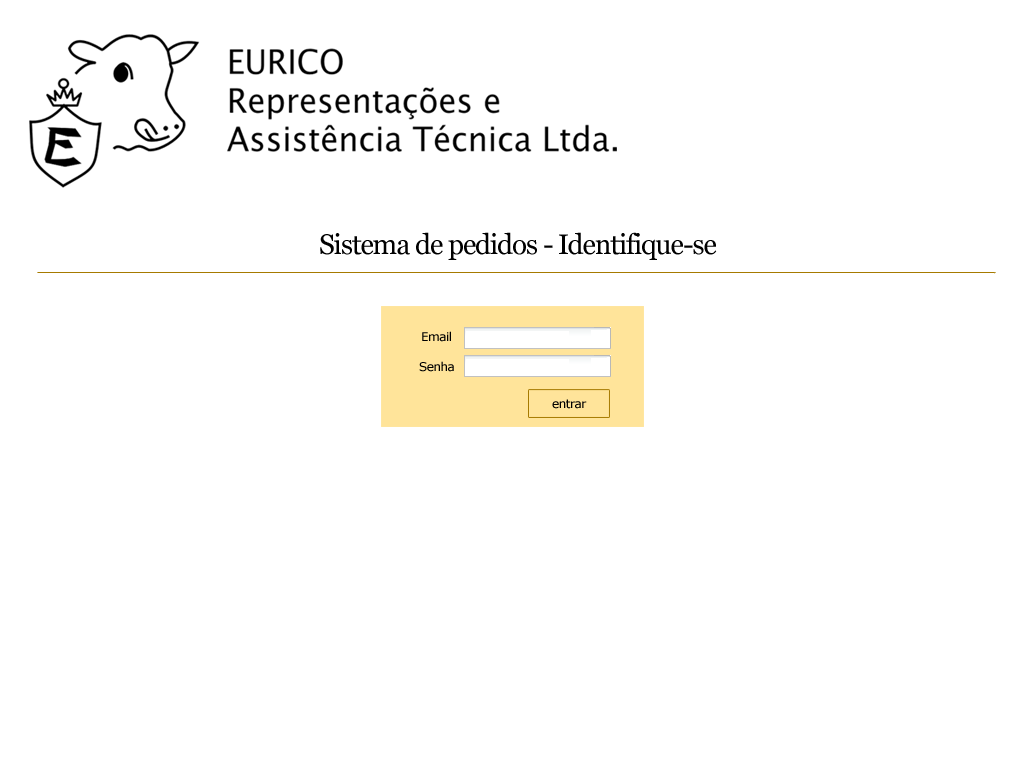
<style>
.page{position:relative;width:1024px;height:768px;background:#ffffff}
.page>*{position:absolute;margin:0}
.t1{font:28px "Georgia";letter-spacing:-0.04em;color:#000000}
.t2{font:12px "Verdana";letter-spacing:-0.04em;color:#000000}
</style>
<div class="page">
<p class="t1" style="left:320px;top:232px;width:397px;height:28px">Sistema de pedidos - Identifique-se</p>
<p class="t2" style="left:422px;top:331px;width:29px;height:11px">Email</p>
<p class="t2" style="left:419px;top:361px;width:35px;height:11px">Senha</p>
<p class="t2" style="left:552px;top:399px;width:35px;height:10px">entrar</p>
</div>
